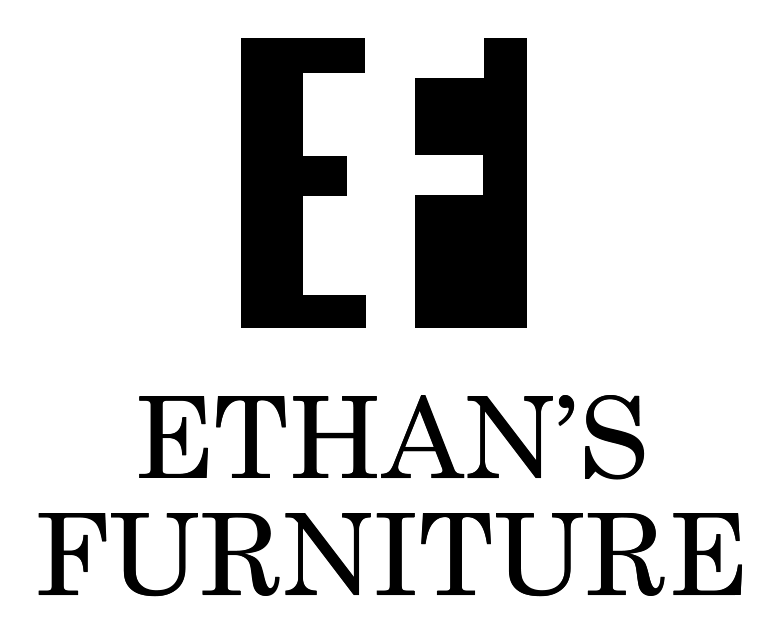
<style>
.page{position:relative;width:780px;height:637px;background:#ffffff}
.page>*{position:absolute;margin:0}
.t1{font:112.5px/116.7px "Century";color:#000000}
</style>
<div class="page">
<p class="t1" style="left:38px;top:395px;width:705px;height:201px;text-align:center">ETHAN’S<br>FURNITURE</p>
</div>
